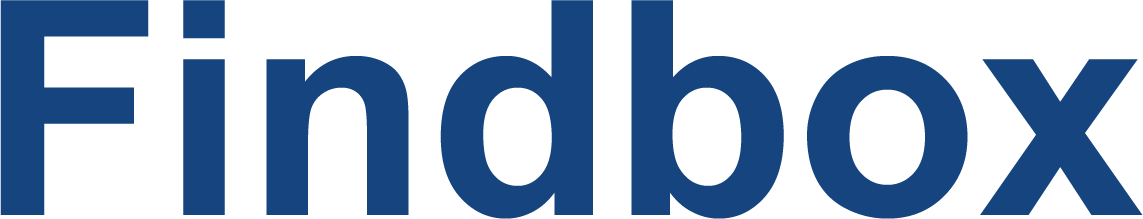
<style>
.page{position:relative;width:1143px;height:219px;background:#ffffff}
.page>*{position:absolute;margin:0}
.t1{font:300px "Arial-BoldMT";color:#16447f}
</style>
<div class="page">
<p class="t1" style="left:0px;top:0px;width:1143px;height:219px">Findbox</p>
</div>
